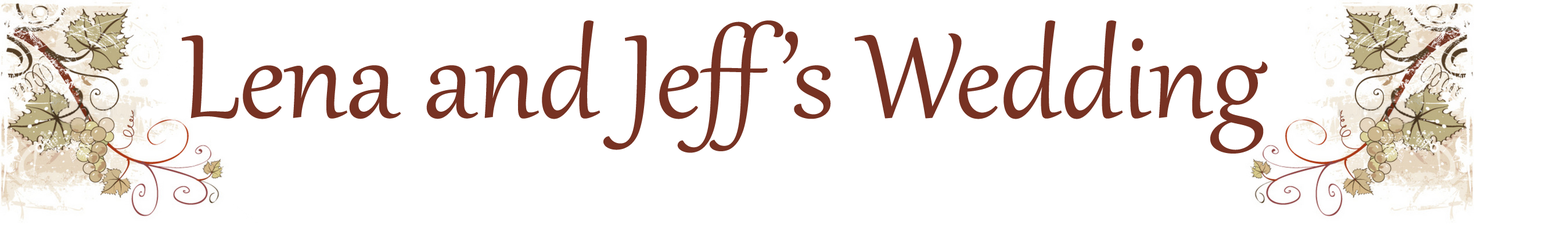
<style>
.page{position:relative;width:1568px;height:235px;background:#ffffff}
.page>*{position:absolute;margin:0}
.t1{font:145.2px "Gabriola";color:#773223}
</style>
<div class="page">
<p class="t1" style="left:181px;top:20px;width:1087px;height:133px">Lena and Jeff’s Wedding</p>
</div>
